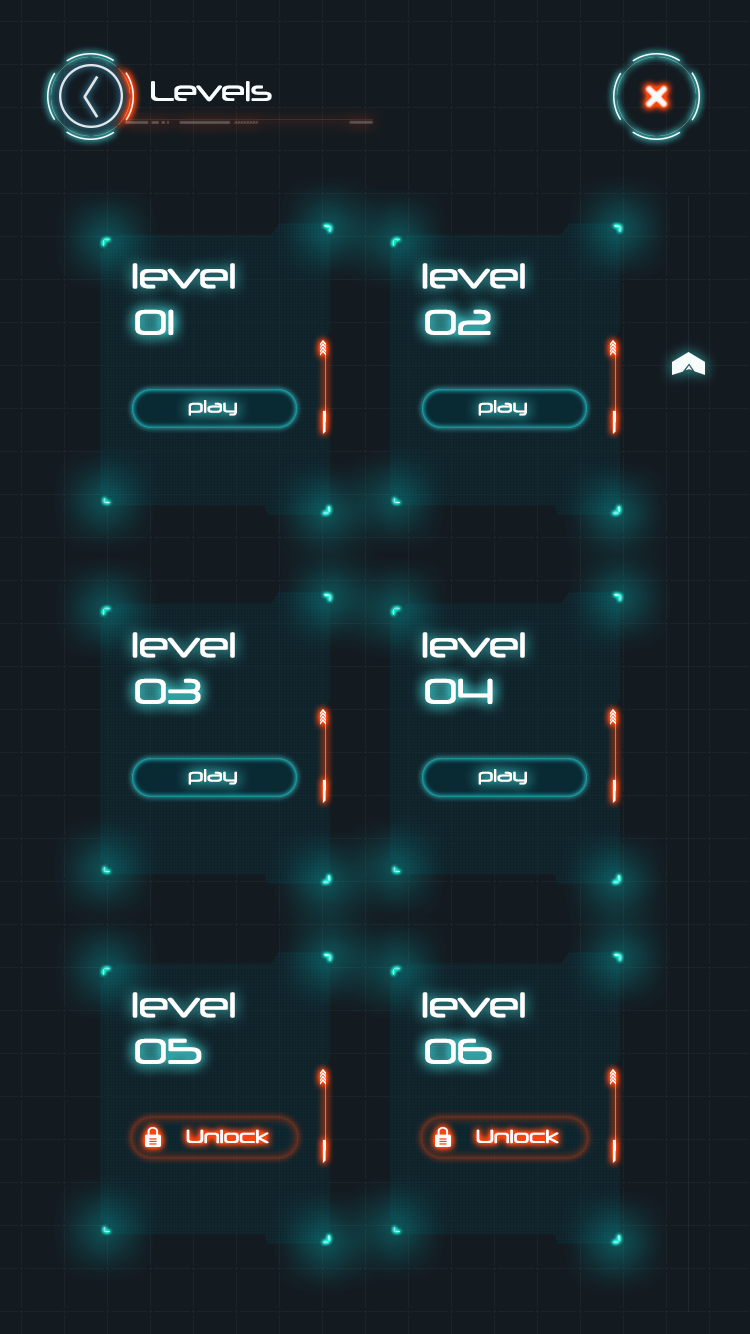
<style>
.page{position:relative;width:750px;height:1334px;background:#131a20}
.page>*{position:absolute;margin:0}
.t1{font:27.2px "Neuropol-Regular";color:#fafdff}
.t2{font:34.3px "Neuropol-Regular";color:#ffffff}
.t3{font:17.2px "Neuropol-Regular";color:#ffffff}
.t4{font:18.1px "Neuropol-Regular";color:#ffffff}
</style>
<div class="page">
<p class="t1" style="left:151px;top:81px;width:121px;height:21px">Levels</p>
<p class="t2" style="left:132px;top:263px;width:103px;height:26px">level</p>
<p class="t2" style="left:422px;top:263px;width:103px;height:26px">level</p>
<p class="t2" style="left:135px;top:309px;width:39px;height:27px">01</p>
<p class="t2" style="left:425px;top:309px;width:66px;height:26px">02</p>
<p class="t3" style="left:188px;top:400px;width:49px;height:16px">play</p>
<p class="t3" style="left:478px;top:400px;width:49px;height:16px">play</p>
<p class="t2" style="left:132px;top:632px;width:103px;height:26px">level</p>
<p class="t2" style="left:422px;top:632px;width:103px;height:26px">level</p>
<p class="t2" style="left:135px;top:678px;width:66px;height:26px">03</p>
<p class="t2" style="left:425px;top:678px;width:68px;height:27px">04</p>
<p class="t3" style="left:188px;top:769px;width:49px;height:16px">play</p>
<p class="t3" style="left:478px;top:769px;width:49px;height:16px">play</p>
<p class="t2" style="left:132px;top:992px;width:103px;height:26px">level</p>
<p class="t2" style="left:422px;top:992px;width:103px;height:26px">level</p>
<p class="t2" style="left:135px;top:1038px;width:67px;height:26px">05</p>
<p class="t2" style="left:425px;top:1038px;width:67px;height:26px">06</p>
<p class="t4" style="left:186px;top:1129px;width:83px;height:15px">Unlock</p>
<p class="t4" style="left:476px;top:1129px;width:83px;height:15px">Unlock</p>
</div>
